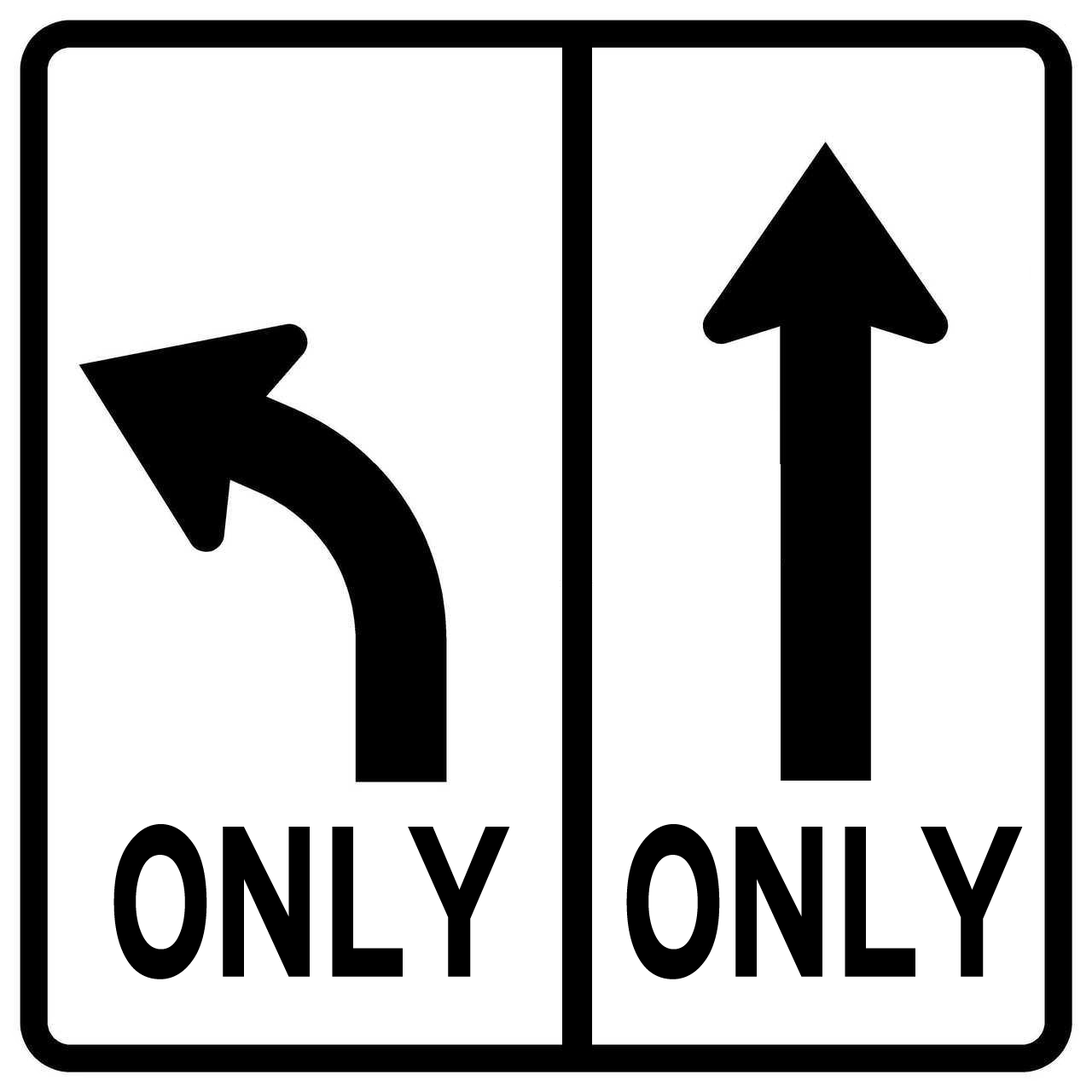
<style>
.page{position:relative;width:1092px;height:1092px;background:#ffffff}
.page>*{position:absolute;margin:0}
.t1{font:226.8px "HittheRoad";color:#000000;scale:0.7 1}
</style>
<div class="page">
<p class="t1" style="left:113px;top:824px;width:397px;height:155px">ONLY</p>
<p class="t1" style="left:626px;top:824px;width:397px;height:155px">ONLY</p>
</div>
